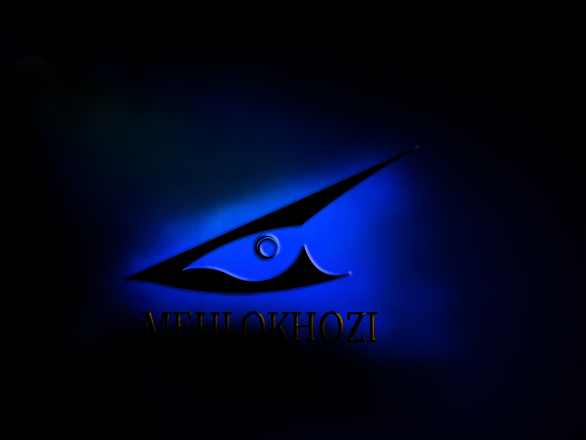
<style>
.page{position:relative;width:586px;height:440px}
.page>*{position:absolute;margin:0}
.t1{font:44.7px "Charter-Bold";color:#000000;text-transform:uppercase;scale:0.8 1}
</style>
<div class="page">
<p class="t1" style="left:141px;top:311px;width:237px;height:32px">MEHLOKHOZI</p>
</div>
